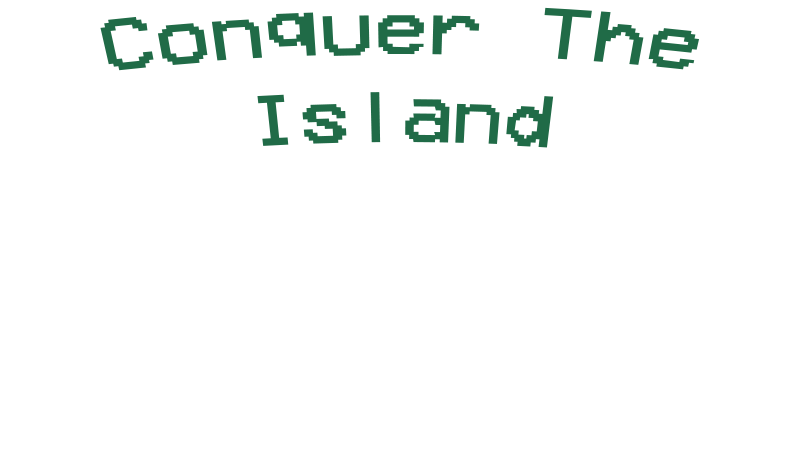
<style>
.page{position:relative;width:800px;height:450px;background:#ffffff}
.page>*{position:absolute;margin:0}
.t1{font:72px "VCROSDMono";color:#206b47}
</style>
<div class="page">
<p class="t1" style="left:100px;top:7px;width:600px;height:141px;text-align:center">Conquer The<br>Island</p>
</div>
